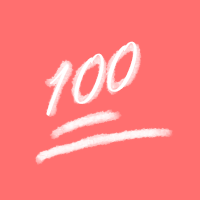
<style>
.page{position:relative;width:200px;height:200px;background:#ff6f6f}
.page>*{position:absolute;margin:0}
.t1{font:75px "VladimirScript";color:#ffffff}
</style>
<div class="page">
<p class="t1" style="left:46px;top:41px;width:91px;height:75px;rotate:-20deg">100</p>
</div>
